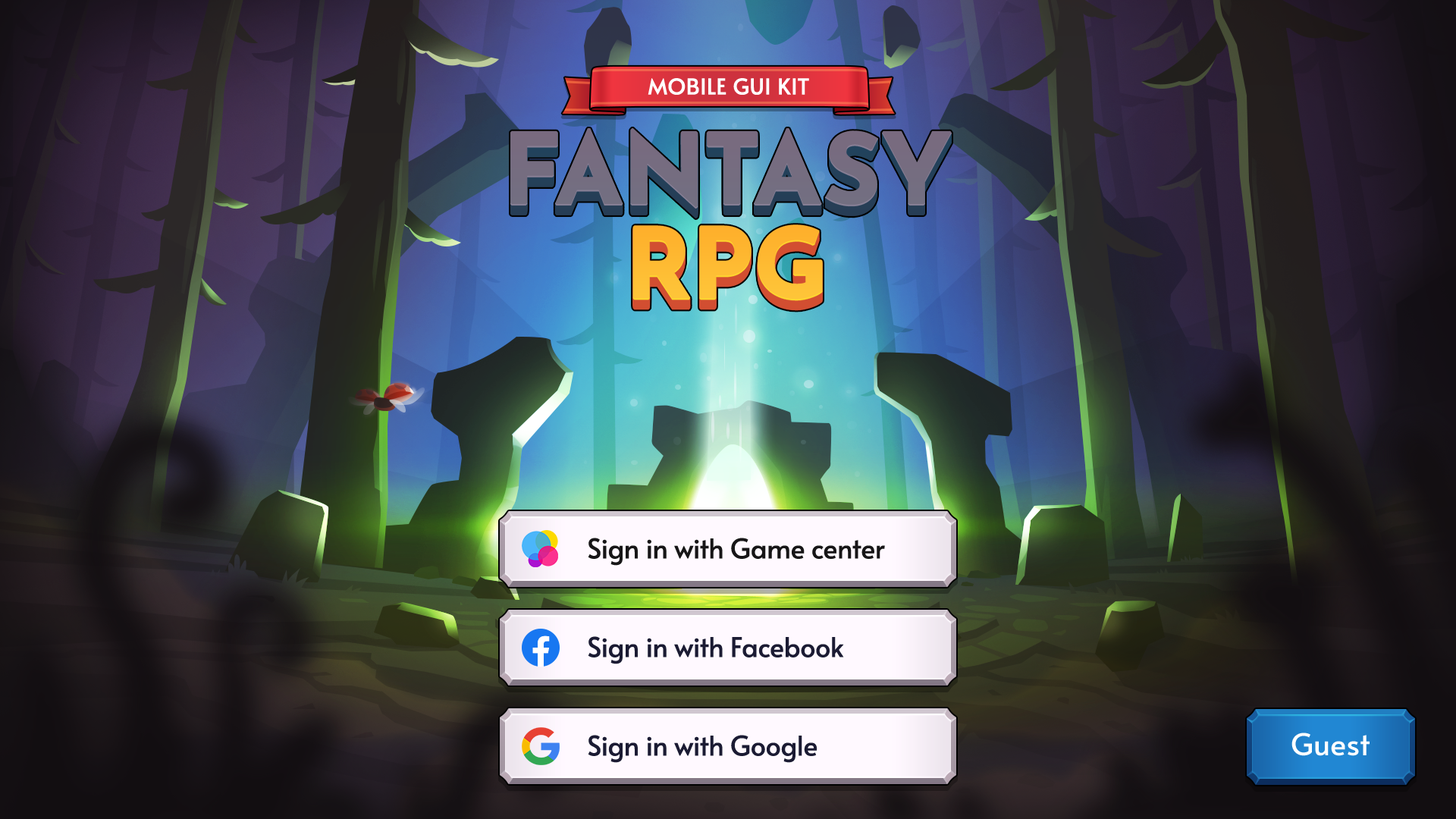
<style>
.page{position:relative;width:1456px;height:819px}
.page>*{position:absolute;margin:0}
.t1{font:21.8px "Alata-Regular";color:#ffffff;text-transform:uppercase;font-weight:bold}
.t2{font:27.3px "Alata-Regular";letter-spacing:-0.01em;color:#171617}
.t3{font:27.3px "Alata-Regular";letter-spacing:-0.01em;color:#1b1b33}
.t4{font:30.3px "Alata-Regular";color:#ffffff}
</style>
<div class="page">
<p class="t1" style="left:648px;top:78px;width:161px;height:17px">mobile GUI kit</p>
<p class="t2" style="left:588px;top:538px;width:297px;height:28px">Sign in with Game center</p>
<p class="t3" style="left:588px;top:636px;width:256px;height:28px">Sign in with Facebook</p>
<p class="t3" style="left:588px;top:735px;width:229px;height:28px">Sign in with Google</p>
<p class="t4" style="left:1291px;top:733px;width:79px;height:23px">Guest</p>
</div>
